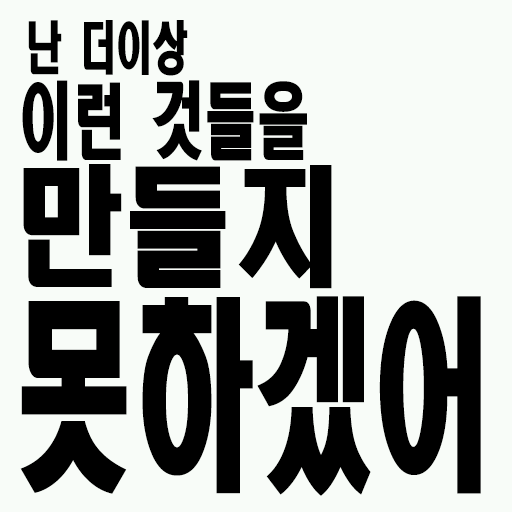
<style>
.page{position:relative;width:512px;height:512px;background:#f8fcf8}
.page>*{position:absolute;margin:0}
.t1{font:57px "HeadlineR-HM";color:#000000;scale:0.63 1}
.t2{font:83.6px "HeadlineR-HM";color:#000000;scale:0.63 1}
.t3{font:129.2px "HeadlineR-HM";color:#000000;scale:0.84 1}
.t4{font:205.2px "HeadlineR-HM";color:#000000;scale:0.58 1}
</style>
<div class="page">
<p class="t1" style="left:28px;top:20px;width:160px;height:56px">난 더이상</p>
<p class="t2" style="left:22px;top:80px;width:285px;height:81px">이런 것들을</p>
<p class="t3" style="left:23px;top:164px;width:309px;height:125px">만들지</p>
<p class="t4" style="left:20px;top:296px;width:461px;height:200px">못하겠어</p>
</div>
